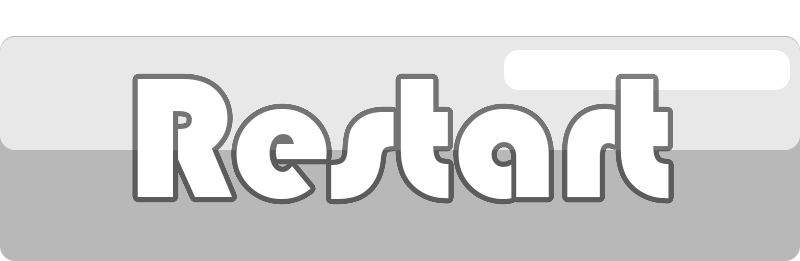
<style>
.page{position:relative;width:800px;height:261px;background:#ffffff}
.page>*{position:absolute;margin:0}
.t1{font:177px "Bauhaus93";color:#ffffff}
</style>
<div class="page">
<p class="t1" style="left:137px;top:79px;width:532px;height:120px">Restart</p>
</div>
